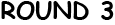
<style>
.page{position:relative;width:115px;height:25px;background:#ffffff}
.page>*{position:absolute;margin:0}
.t1{font:24px "ComicSansMS-Bold";color:#000000}
</style>
<div class="page">
<p class="t1" style="left:1px;top:1px;width:113px;height:19px">ROUND 3</p>
</div>
